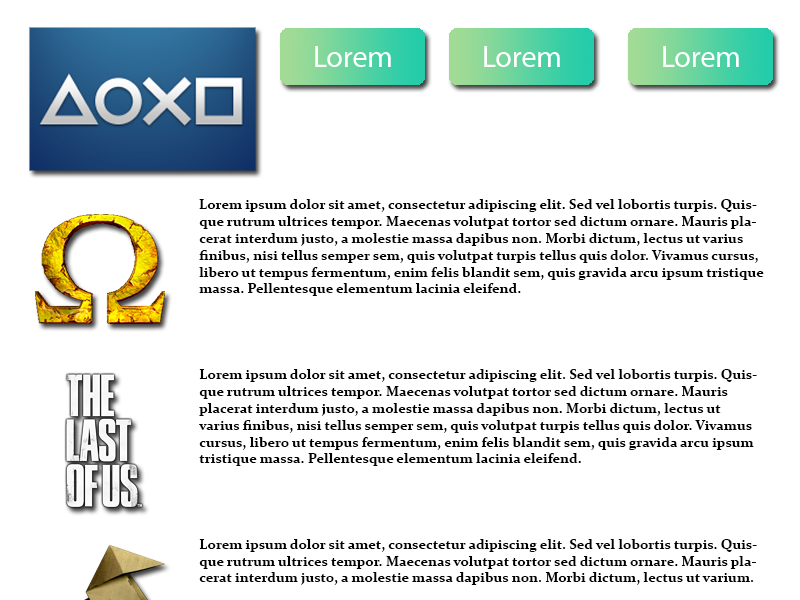
<style>
.page{position:relative;width:800px;height:600px;background:#ffffff}
.page>*{position:absolute;margin:0}
.t1{font:14px "Constantia-Bold";color:#000000}
</style>
<div class="page">
<p class="t1" style="left:199px;top:199px;width:565px;height:97px">Lorem ipsum dolor sit amet, consectetur adipiscing elit. Sed vel lobortis turpis. Quisque rutrum ultrices tempor. Maecenas volutpat tortor sed dictum ornare. Mauris placerat interdum justo, a molestie massa dapibus non. Morbi dictum, lectus ut varius finibus, nisi tellus semper sem, quis volutpat turpis tellus quis dolor. Vivamus cursus, libero ut tempus fermentum, enim felis blandit sem, quis gravida arcu ipsum tristique massa. Pellentesque elementum lacinia eleifend.</p>
<p class="t1" style="left:199px;top:369px;width:558px;height:97px">Lorem ipsum dolor sit amet, consectetur adipiscing elit. Sed vel lobortis turpis. Quisque rutrum ultrices tempor. Maecenas volutpat tortor sed dictum ornare. Mauris placerat interdum justo, a molestie massa dapibus non. Morbi dictum, lectus ut varius finibus, nisi tellus semper sem, quis volutpat turpis tellus quis dolor. Vivamus cursus, libero ut tempus fermentum, enim felis blandit sem, quis gravida arcu ipsum tristique massa. Pellentesque elementum lacinia eleifend.</p>
<p class="t1" style="left:199px;top:539px;width:558px;height:46px">Lorem ipsum dolor sit amet, consectetur adipiscing elit. Sed vel lobortis turpis. Quisque rutrum ultrices tempor. Maecenas volutpat tortor sed dictum ornare. Mauris placerat interdum justo, a molestie massa dapibus non. Morbi dictum, lectus ut varium.</p>
</div>
